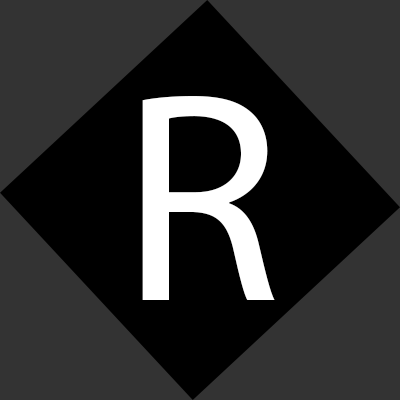
<style>
.page{position:relative;width:400px;height:400px;background:#333333}
.page>*{position:absolute;margin:0}
.t1{font:300.4px "MyriadPro-Regular";color:#ffffff}
</style>
<div class="page">
<p class="t1" style="left:142px;top:96px;width:133px;height:204px">R</p>
</div>
